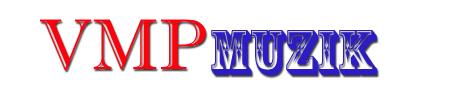
<style>
.page{position:relative;width:454px;height:100px;background:#ffffff}
.page>*{position:absolute;margin:0}
.t1{font:60px "RosewoodStd-Regular";color:#2c1cc4}
.t2{font:72px "ImprintMT-Shadow";color:#ff000c}
</style>
<div class="page">
<p class="t1" style="left:40px;top:19px;width:338px;height:57px"><span class="t2">VMP</span>MUZIK</p>
</div>
